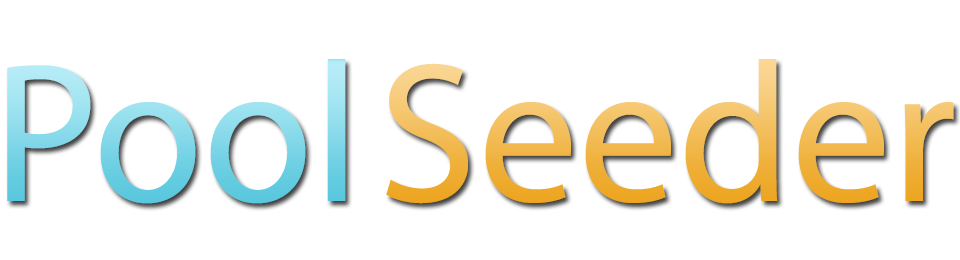
<style>
.page{position:relative;width:960px;height:260px;background:#ffffff}
.page>*{position:absolute;margin:0}
.t1{font:200px "MyriadPro-Regular"}
</style>
<div class="page">
<p class="t1" style="left:7px;top:59px;width:339px;height:145px">Pool</p>
<p class="t1" style="left:386px;top:59px;width:568px;height:145px">Seeder</p>
</div>
